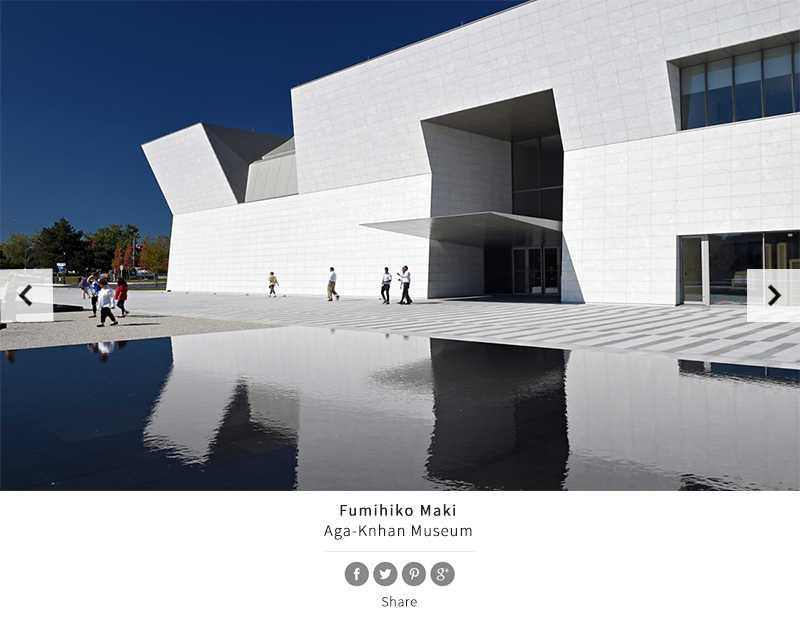
<style>
.page{position:relative;width:800px;height:625px;background:#ffffff}
.page>*{position:absolute;margin:0}
.t1{font:16px "SourceSansPro-Regular";letter-spacing:0.075em;color:#212121;font-weight:bold}
.t2{font:16px "SourceSansPro-Light";letter-spacing:0.05em;color:#212121;font-weight:bold}
.t3{font:14px "SourceSansPro-Light";letter-spacing:0.025em;color:#212121;font-weight:bold}
</style>
<div class="page">
<p class="t1" style="left:340px;top:504px;width:116px;height:12px">Fumihiko Maki</p>
<p class="t2" style="left:324px;top:524px;width:148px;height:16px">Aga-Knhan Museum</p>
<p class="t3" style="left:381px;top:596px;width:36px;height:11px">Share</p>
</div>
